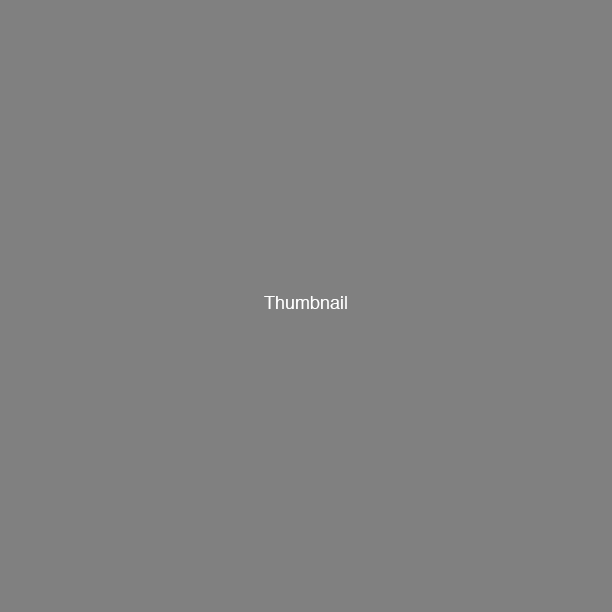
<style>
.page{position:relative;width:612px;height:612px;background:#808080}
.page>*{position:absolute;margin:0}
.t1{font:18px "Helvetica";color:#ffffff}
</style>
<div class="page">
<p class="t1" style="left:264px;top:296px;width:83px;height:13px">Thumbnail</p>
</div>
